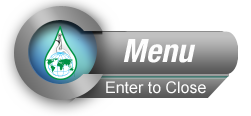
<style>
.page{position:relative;width:251px;height:116px;background:#ffffff}
.page>*{position:absolute;margin:0}
.t1{font:32.1px "HelveticaNeueLTPro-BdCnO";color:#fdfdfd}
.t2{font:16px "ArialMT";color:#fdfdfd}
</style>
<div class="page">
<p class="t1" style="left:123px;top:39px;width:73px;height:24px">Menu</p>
<p class="t2" style="left:106px;top:81px;width:100px;height:13px">Enter to Close</p>
</div>
